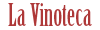
<style>
.page{position:relative;width:100px;height:30px;background:#ffffff}
.page>*{position:absolute;margin:0}
.t1{font:30px "BirchStd";color:#ae3838}
</style>
<div class="page">
<p class="t1" style="left:8px;top:3px;width:84px;height:23px">La Vinoteca</p>
</div>
